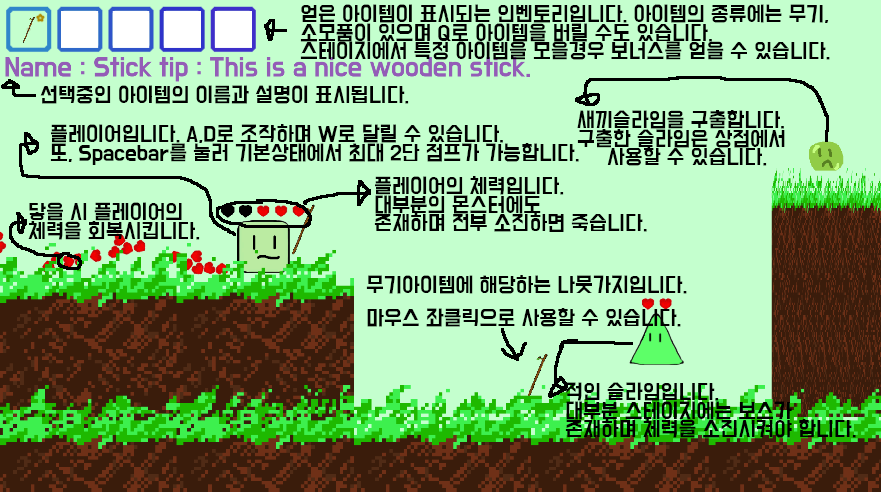
<style>
.page{position:relative;width:881px;height:492px;background:#c4ffce}
.page>*{position:absolute;margin:0}
.t1{font:18.7px/18.7px "BMDoHyeon";color:#000000}
.t2{font:18.7px "BMDoHyeon";color:#000000}
</style>
<div class="page">
<p class="t1" style="left:300px;top:4px;width:530px;height:56px">얻은 아이템이 표시되는 인벤토리입니다. 아이템의 종류에는 무기, <br>소모품이 있으며 Q로 아이템을 버릴 수도 있습니다. <br>스테이지에서 특정 아이템을 모을경우 보너스를 얻을 수 있습니다.</p>
<p class="t2" style="left:40px;top:85px;width:369px;height:19px">선택중인 아이템의 이름과 설명이 표시됩니다.</p>
<p class="t1" style="left:577px;top:110px;width:208px;height:56px">새끼슬라임을 구출합니다.<br>구출한 슬라임은 상점에서 <br>     사용할 수 있습니다.</p>
<p class="t1" style="left:50px;top:124px;width:529px;height:41px">플레이어입니다. A,D로 조작하며 W로 달릴 수 있습니다.<br>또, Spacebar를 눌러 기본상태에서 최대 2단 점프가 가능합니다.</p>
<p class="t1" style="left:374px;top:176px;width:273px;height:56px">플레이어의 체력입니다. <br>대부분의 몬스터에도 <br>존재하며 전부 소진하면 죽습니다.</p>
<p class="t1" style="left:28px;top:202px;width:172px;height:38px">닿을 시 플레이어의 <br>체력을 회복시킵니다.</p>
<p class="t2" style="left:366px;top:275px;width:321px;height:52px">무기아이템에 해당하는 나뭇가지입니다.<br>마우스 좌클릭으로 사용할 수 있습니다.</p>
<p class="t1" style="left:565px;top:382px;width:291px;height:56px">적인 슬라임입니다.<br>대부분 스테이지에는 보스가 <br>존재하며 체력을 소진시켜야 합니다.</p>
</div>
